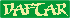
<style>
.page{position:relative;width:70px;height:18px;background:#029834}
.page>*{position:absolute;margin:0}
.t1{font:18.2px "SevenSwordsmenBB";color:#eeefa3}
</style>
<div class="page">
<p class="t1" style="left:3px;top:3px;width:65px;height:13px">daftar</p>
</div>
